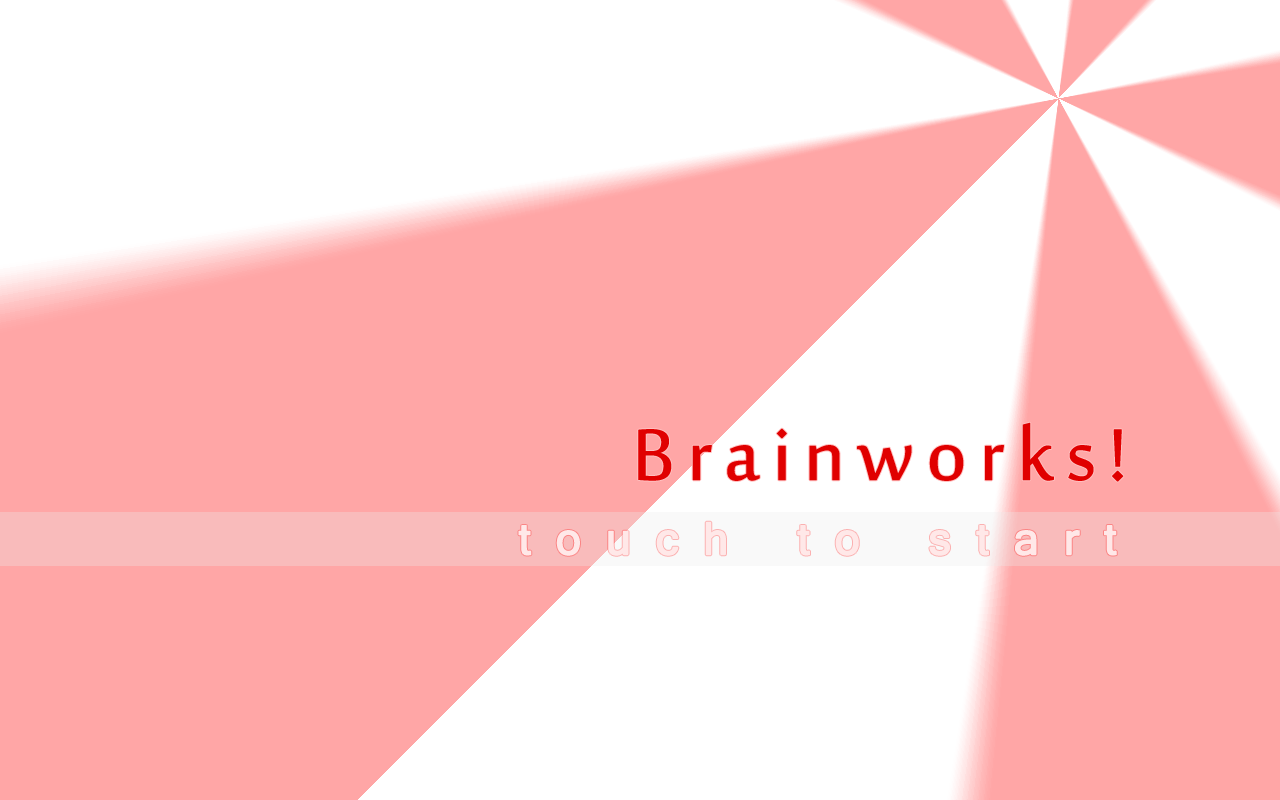
<style>
.page{position:relative;width:1280px;height:800px;background:#ffa6a6}
.page>*{position:absolute;margin:0}
.t1{font:100px "SakkalMajalla";letter-spacing:0.1em;color:#e00000;font-weight:bold}
.t2{font:48px "Shruti";letter-spacing:0.5em;color:#ffe8e8;font-weight:bold}
</style>
<div class="page">
<p class="t1" style="left:638px;top:422px;width:486px;height:60px">Brainworks!</p>
<p class="t2" style="left:518px;top:521px;width:599px;height:35px">touch to start</p>
</div>
